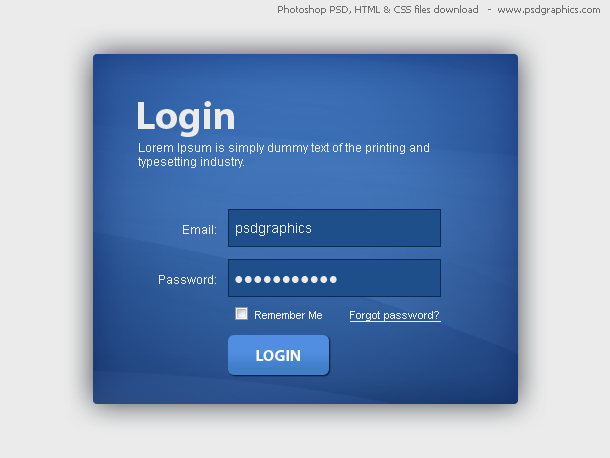
<style>
.page{position:relative;width:610px;height:458px;background:#ebebeb}
.page>*{position:absolute;margin:0}
.t1{font:9.7px "Tahoma";color:#707070}
.t2{font:40px "MyriadPro-Bold";color:#ebebeb}
.t3{font:12px "ArialMT";color:#ebebeb}
.t4{font:12px/50px "ArialMT";color:#efefef}
.t5{font:12px/51px "ArialMT";color:#efefef}
.t6{font:14px "ArialMT";color:#ebebeb}
.t7{font:27px "ArialMT";color:#ebebeb}
.t8{font:11px "ArialMT";color:#efefef;text-decoration:underline}
.t9{font:11px "ArialMT";color:#efefef}
.t10{font:16px "MyriadPro-Bold";color:#ffffff;text-transform:uppercase}
</style>
<div class="page">
<p class="t1" style="left:278px;top:5px;width:322px;height:10px">Photoshop PSD, HTML &amp; CSS files download   -  www.psdgraphics.com</p>
<p class="t2" style="left:138px;top:101px;width:96px;height:36px">Login</p>
<p class="t3" style="left:138px;top:143px;width:291px;height:25px">Lorem Ipsum is simply dummy text of the printing and<br>typesetting industry.</p>
<p class="t4" style="left:159px;top:225px;width:57px;height:59px;text-align:right"><span class="t5">Email:<br></span>Password:</p>
<p class="t6" style="left:236px;top:223px;width:75px;height:13px">psdgraphics</p>
<p class="t7" style="left:235px;top:276px;width:102px;height:7px">•••••••••••</p>
<p class="t8" style="left:255px;top:311px;width:186px;height:11px"><span class="t9">Remember Me         </span>Forgot password?</p>
<p class="t10" style="left:256px;top:350px;width:44px;height:11px">Login</p>
</div>
